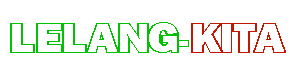
<style>
.page{position:relative;width:297px;height:71px;background:#ffffff}
.page>*{position:absolute;margin:0}
.t1{font:46.5px "Goffik-Outline";color:#01c201;scale:1.11 1}
.t2{font:46.5px "Goffik-Outline";color:#c21701;scale:1.11 1}
</style>
<div class="page">
<p class="t1" style="left:10px;top:22px;width:276px;height:31px">LELANG-<span class="t2">KITA</span></p>
</div>
